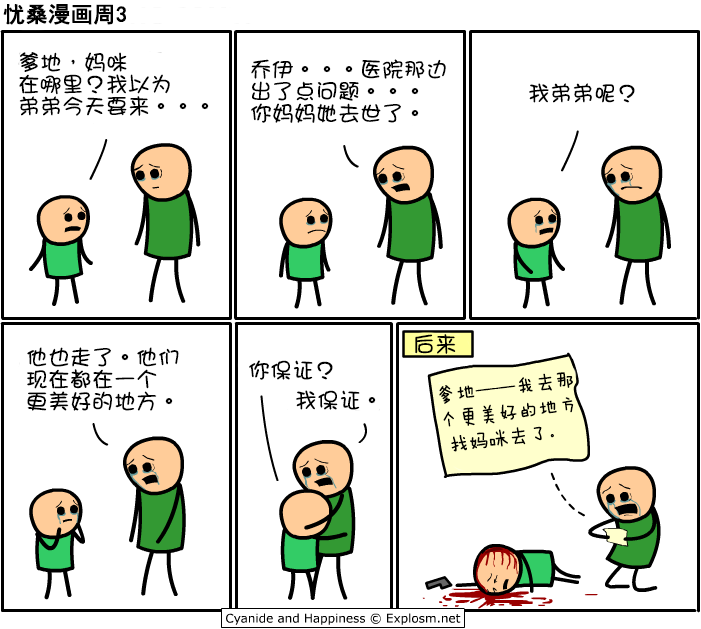
<style>
.page{position:relative;width:701px;height:629px;background:#ffffff}
.page>*{position:absolute;margin:0}
.t1{font:22px "SimHei";color:#000000;font-weight:bold}
.t2{font:22px/22px "DFGirl";color:#000000}
.t3{font:22px "DFGirl";color:#000000}
.t4{font:20px/25px "FZMWJW--GB1-0";color:#000000}
</style>
<div class="page">
<p class="t1" style="left:3px;top:4px;width:123px;height:21px">忧桑漫画周3</p>
<p class="t2" style="left:19px;top:52px;width:190px;height:64px">爹地，妈咪<br>在哪里？我以为<br>弟弟今天要来。。。</p>
<p class="t2" style="left:251px;top:59px;width:195px;height:64px">乔伊。。。医院那边<br>出了点问题。。。<br>你妈妈她去世了。</p>
<p class="t3" style="left:529px;top:83px;width:106px;height:20px">我弟弟呢？</p>
<p class="t3" style="left:415px;top:334px;width:41px;height:20px">后来</p>
<p class="t2" style="left:27px;top:347px;width:152px;height:64px">他也走了。他们<br>现在都在一个<br>更美好的地方。</p>
<p class="t3" style="left:249px;top:360px;width:84px;height:20px">你保证？</p>
<p class="t4" style="left:439px;top:372px;width:135px;height:80px;rotate:-7deg">爹地——我去那<br>个更美好的地方<br> 找妈咪去了。</p>
<p class="t3" style="left:296px;top:390px;width:80px;height:20px">我保证。</p>
</div>
